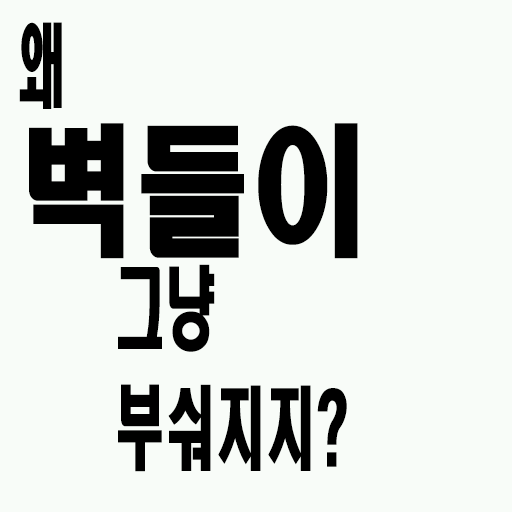
<style>
.page{position:relative;width:512px;height:512px;background:#f8fcf8}
.page>*{position:absolute;margin:0}
.t1{font:140.4px/120px "HeadlineR-HM";color:#000000;scale:0.83 1}
.t2{font:90px/120px "HeadlineR-HM";color:#000000;scale:0.56 1}
</style>
<div class="page">
<p class="t1" style="left:19px;top:22px;width:339px;height:237px"><span class="t2">왜<br></span>벽들이</p>
<p class="t2" style="left:118px;top:264px;width:229px;height:208px">그냥<br>부숴지지?</p>
</div>
